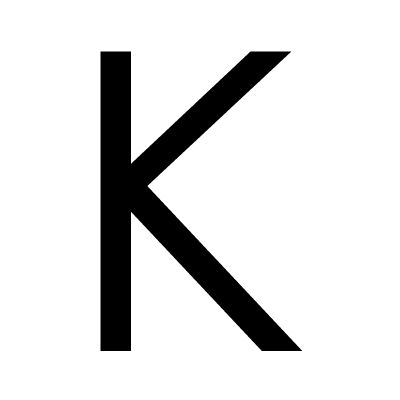
<style>
.page{position:relative;width:400px;height:400px;background:#ffffff}
.page>*{position:absolute;margin:0}
.t1{font:416.7px "CenturyGothic";color:#000000}
</style>
<div class="page">
<p class="t1" style="left:100px;top:51px;width:203px;height:300px">K</p>
</div>
